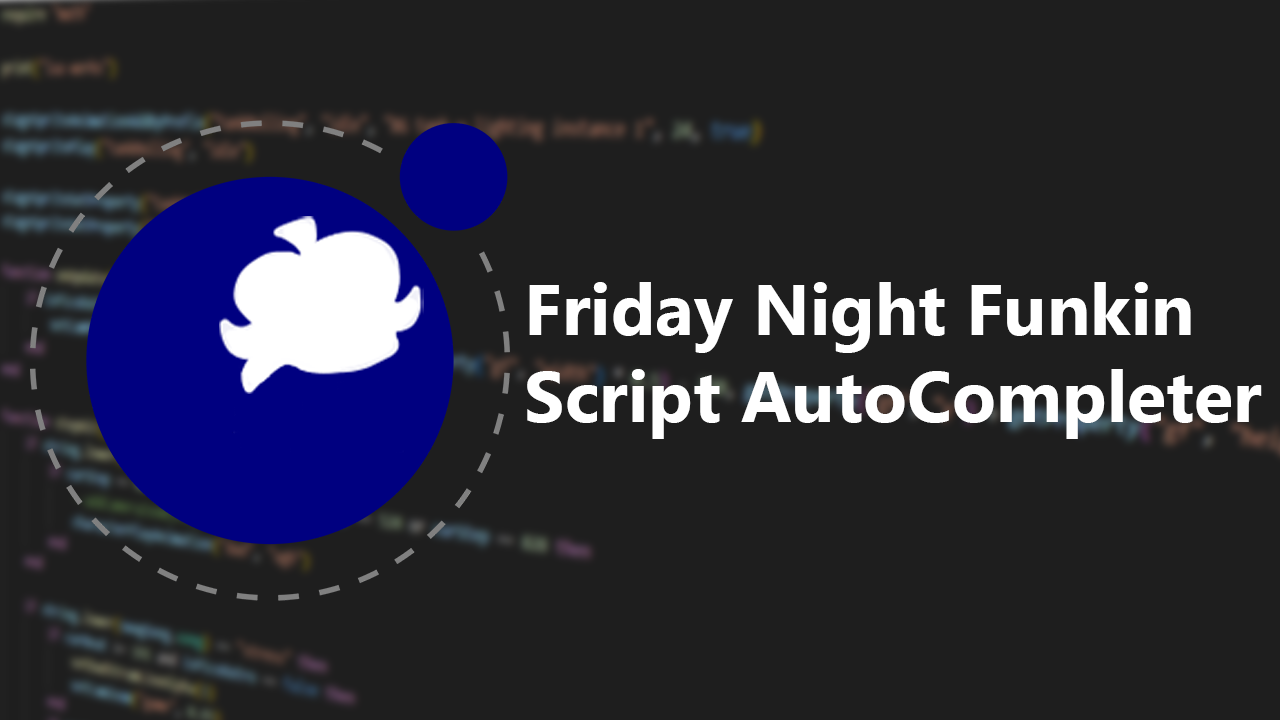
<style>
.page{position:relative;width:1280px;height:720px;background:#1e1e1e}
.page>*{position:absolute;margin:0}
.t1{font:72px "MicrosoftTaiLe-Bold";color:#ffffff}
</style>
<div class="page">
<p class="t1" style="left:527px;top:282px;width:735px;height:157px">Friday Night Funkin<br>Script AutoCompleter</p>
</div>
